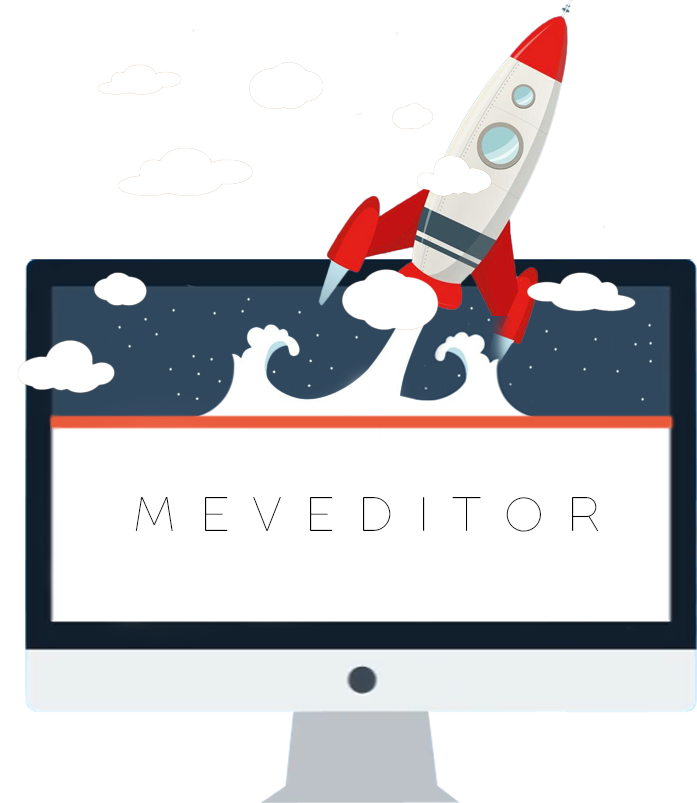
<style>
.page{position:relative;width:697px;height:803px;background:#ffffff}
.page>*{position:absolute;margin:0}
.t1{font:48px "FullSansLC-10Thin";color:#000000}
</style>
<div class="page">
<p class="t1" style="left:135px;top:497px;width:464px;height:35px">M  E  V  E  D  I  T  O  R</p>
</div>
